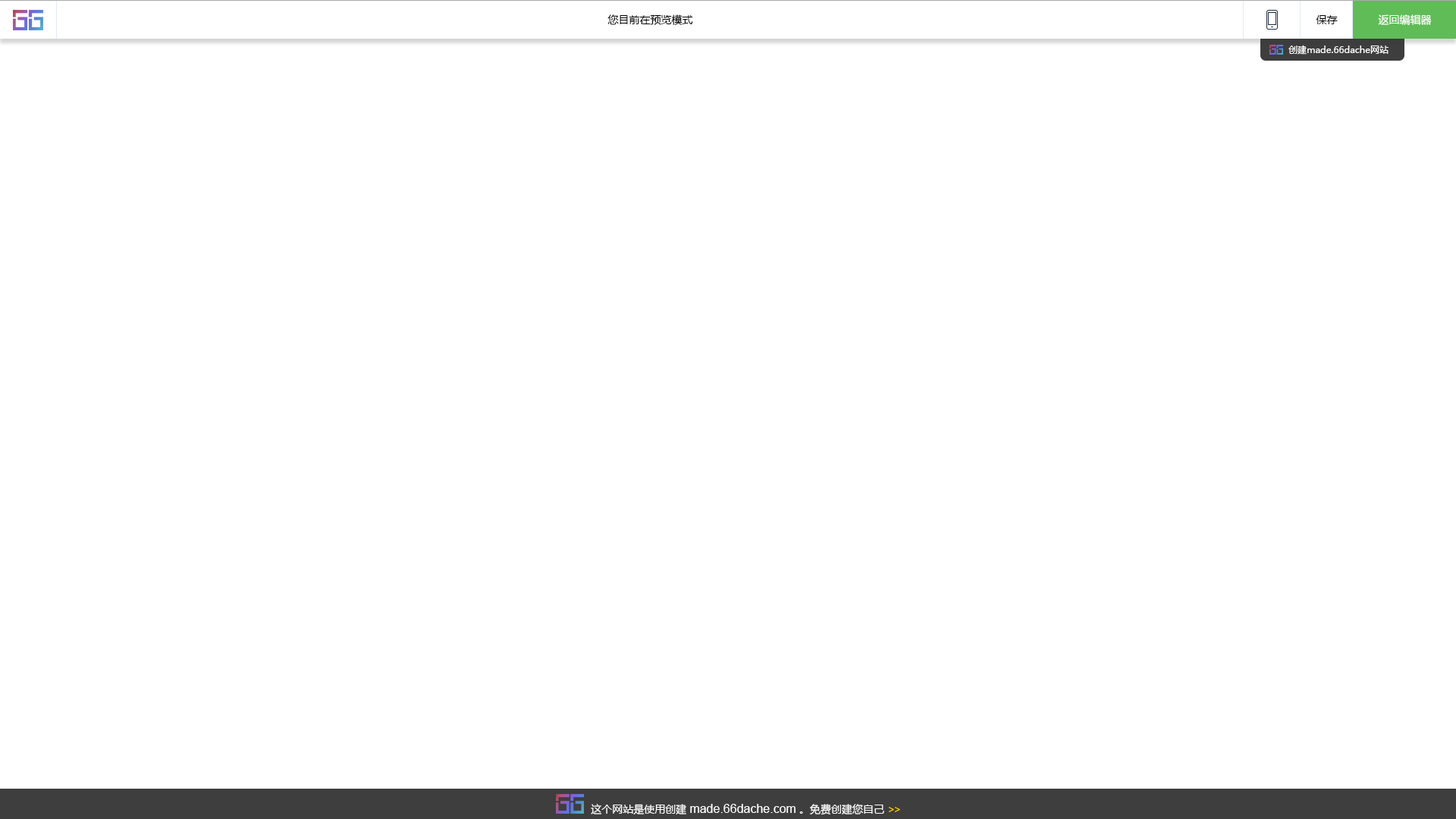
<style>
.page{position:relative;width:1456px;height:819px;background:#ffffff}
.page>*{position:absolute;margin:0}
.t1{font:10.6px "MicrosoftYaHei";color:#000000}
.t2{font:10.6px "MicrosoftYaHei";color:#ffffff}
.t3{font:9.1px "MicrosoftYaHei";color:#ffffff}
.t4{font:12.1px "ArialMT";color:#ffffff}
.t5{font:10.6px "MicrosoftYaHei";color:#ffcc00}
</style>
<div class="page">
<p class="t1" style="left:607px;top:14px;width:86px;height:11px">您目前在预览模式</p>
<p class="t1" style="left:1316px;top:15px;width:22px;height:9px">保存</p>
<p class="t2" style="left:1378px;top:14px;width:54px;height:11px">返回编辑器</p>
<p class="t3" style="left:1288px;top:45px;width:100px;height:10px">创建made.66dache网站</p>
<p class="t4" style="left:591px;top:804px;width:309px;height:11px"><span class="t2">这个网站是使用创建 </span>made.66dache.com<span class="t2"> 。免费创建您自己 </span><span class="t5">&gt;&gt;</span></p>
</div>
